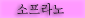
<style>
.page{position:relative;width:85px;height:18px}
.page>*{position:absolute;margin:0}
.t1{font:13.2px "BatangChe";scale:0.91 1}
</style>
<div class="page">
<p class="t1" style="left:17px;top:3px;width:47px;height:13px">소프라노</p>
</div>
